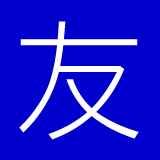
<style>
.page{position:relative;width:160px;height:160px;background:#0000cc}
.page>*{position:absolute;margin:0}
.t1{font:130px "FMotoyaCedar-W1-90msp-RKSJ-H";color:#ffffff}
</style>
<div class="page">
<p class="t1" style="left:19px;top:21px;width:120px;height:119px">友</p>
</div>
